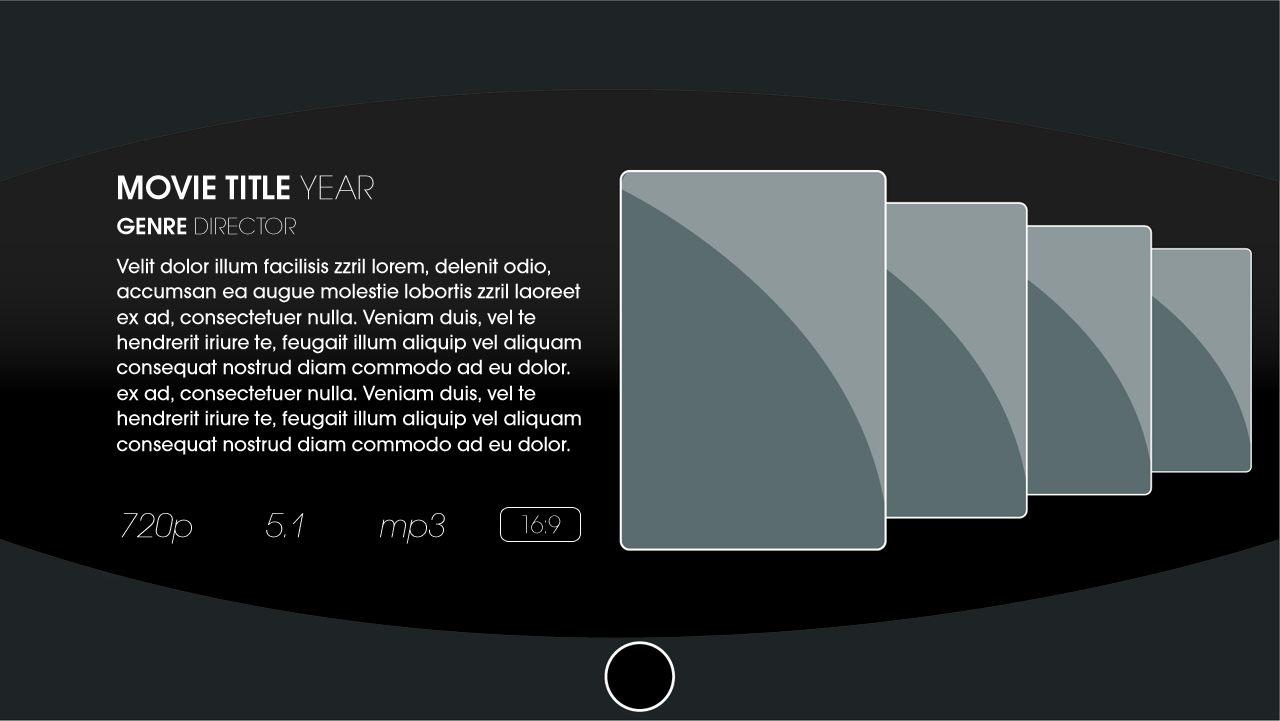
<style>
.page{position:relative;width:1280px;height:721px;background:#1e2425}
.page>*{position:absolute;margin:0}
.t1{font:35px "AvantGardeITCTTDemi";color:#ffffff}
.t2{font:35px "AvantGardeExtLitITCTT";color:#ffffff}
.t3{font:24px "AvantGardeExtLitITCTT";color:#ffffff}
.t4{font:24px "AvantGardeITCTTDemi";color:#ffffff}
.t5{font:21.2px "AvantGardeMdITCTT";color:#ffffff}
.t6{font:35.5px "AvantGardeExtLitITCTTOblique";color:#ffffff}
.t7{font:25.9px "AvantGardeExtLitITCTT";color:#ffffff}
</style>
<div class="page">
<p class="t1" style="left:118px;top:175px;width:256px;height:25px">MOVIE TITLE <span class="t2">YEAR</span></p>
<p class="t3" style="left:117px;top:217px;width:179px;height:18px"><span class="t4">GENRE </span>DIRECTOR</p>
<p class="t5" style="left:116px;top:258px;width:465px;height:197px">Velit dolor illum facilisis zzril lorem, delenit odio, <br>accumsan ea augue molestie lobortis zzril laoreet <br>ex ad, consectetuer nulla. Veniam duis, vel te <br>hendrerit iriure te, feugait illum aliquip vel aliquam <br>consequat nostrud diam commodo ad eu dolor.<br>ex ad, consectetuer nulla. Veniam duis, vel te <br>hendrerit iriure te, feugait illum aliquip vel aliquam <br>consequat nostrud diam commodo ad eu dolor.</p>
<p class="t6" style="left:121px;top:513px;width:71px;height:31px">720p</p>
<p class="t6" style="left:266px;top:513px;width:38px;height:25px">5.1</p>
<p class="t6" style="left:380px;top:513px;width:65px;height:31px">mp3</p>
<p class="t7" style="left:522px;top:515px;width:39px;height:19px">16:9</p>
</div>
